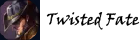
<style>
.page{position:relative;width:140px;height:40px;background:#ffffff}
.page>*{position:absolute;margin:0}
.t1{font:12px "VinerHandITC";color:#000000}
</style>
<div class="page">
<p class="t1" style="left:46px;top:12px;width:94px;height:18px">Twisted Fate</p>
</div>
